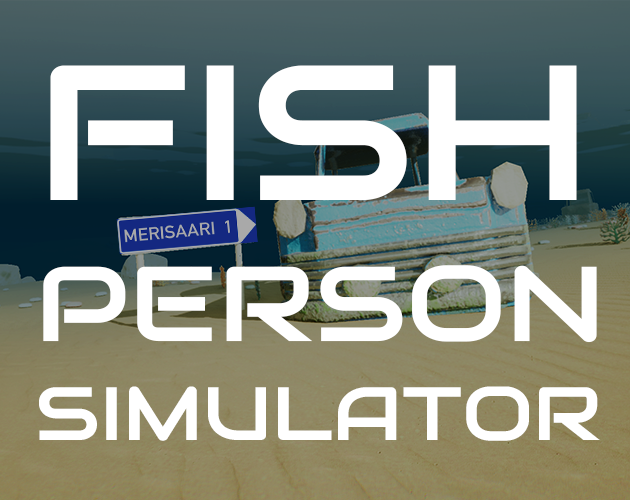
<style>
.page{position:relative;width:630px;height:500px;background:#ffffff}
.page>*{position:absolute;margin:0}
.t1{font:75.5px "Audiowide-Regular";color:#ffffff;scale:1.1 1}
.t2{font:192px "Audiowide-Regular";color:#ffffff;scale:1.1 1}
.t3{font:106.5px "Audiowide-Regular";color:#ffffff;scale:1.1 1}
</style>
<div class="page">
<p class="t1" style="left:39px;top:65px;width:561px;height:376px"><span class="t2">FISH<br></span><span class="t3">PERSON<br></span>SIMULATOR</p>
</div>
